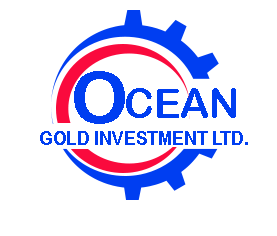
<style>
.page{position:relative;width:277px;height:236px;background:#ffffff}
.page>*{position:absolute;margin:0}
.t1{font:71.6px "ArialRoundedMTBold";color:#003ef1}
.t2{font:40.6px "ArialRoundedMTBold";color:#003ef1}
.t3{font:19.8px "ArialRoundedMTBold";color:#003ef1;scale:0.87 1}
</style>
<div class="page">
<p class="t1" style="left:74px;top:71px;width:51px;height:53px">O</p>
<p class="t2" style="left:126px;top:88px;width:110px;height:30px">CEAN</p>
<p class="t3" style="left:40px;top:131px;width:208px;height:14px">.GOLD INVESTMENT LTD</p>
</div>
